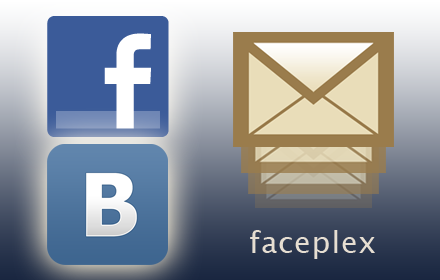
<style>
.page{position:relative;width:440px;height:280px}
.page>*{position:absolute;margin:0}
.t1{font:30px "LucidaGrande";letter-spacing:0.025em;color:#e6ded2}
</style>
<div class="page">
<p class="t1" style="left:250px;top:230px;width:125px;height:29px">faceplex</p>
</div>
